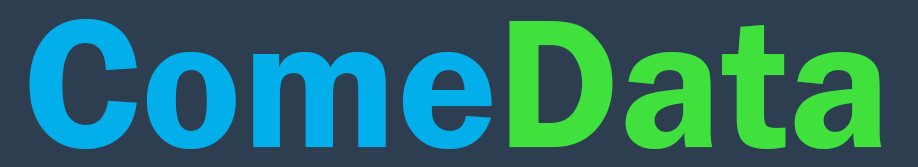
<style>
.page{position:relative;width:918px;height:167px;background:#2c3e50}
.page>*{position:absolute;margin:0}
.t1{font:188.6px "FranklinGothic-Demi";color:#02afeb}
.t2{font:188.6px "FranklinGothic-Demi";color:#40e03d}
</style>
<div class="page">
<p class="t1" style="left:29px;top:19px;width:853px;height:130px">Come<span class="t2">Data</span></p>
</div>
